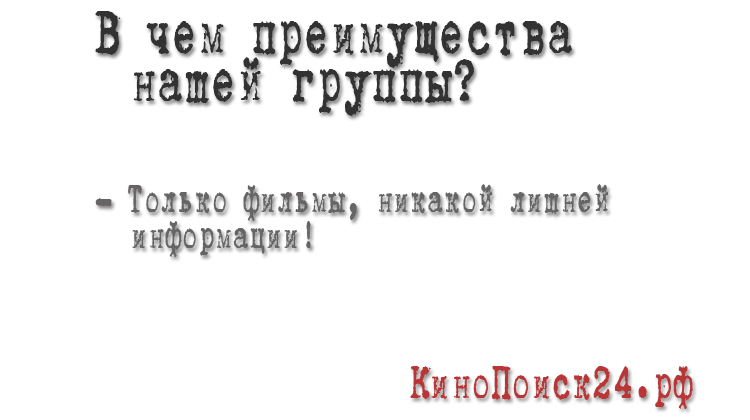
<style>
.page{position:relative;width:750px;height:420px;background:#ffffff}
.page>*{position:absolute;margin:0}
.t1{font:72px/48px "B52";color:#323232;scale:0.67 1}
.t2{font:45px "B52";color:#666464;scale:0.67 1}
.t3{font:54px "B52";color:#ba3636;scale:0.67 1}
</style>
<div class="page">
<p class="t1" style="left:95px;top:11px;width:477px;height:105px">В чем преимущества<br> нашей группы?</p>
<p class="t2" style="left:95px;top:184px;width:514px;height:73px">- Только фильмы, никакой лишней<br> информации!</p>
<p class="t3" style="left:410px;top:366px;width:283px;height:43px">КиноПоиск24.рф</p>
</div>
